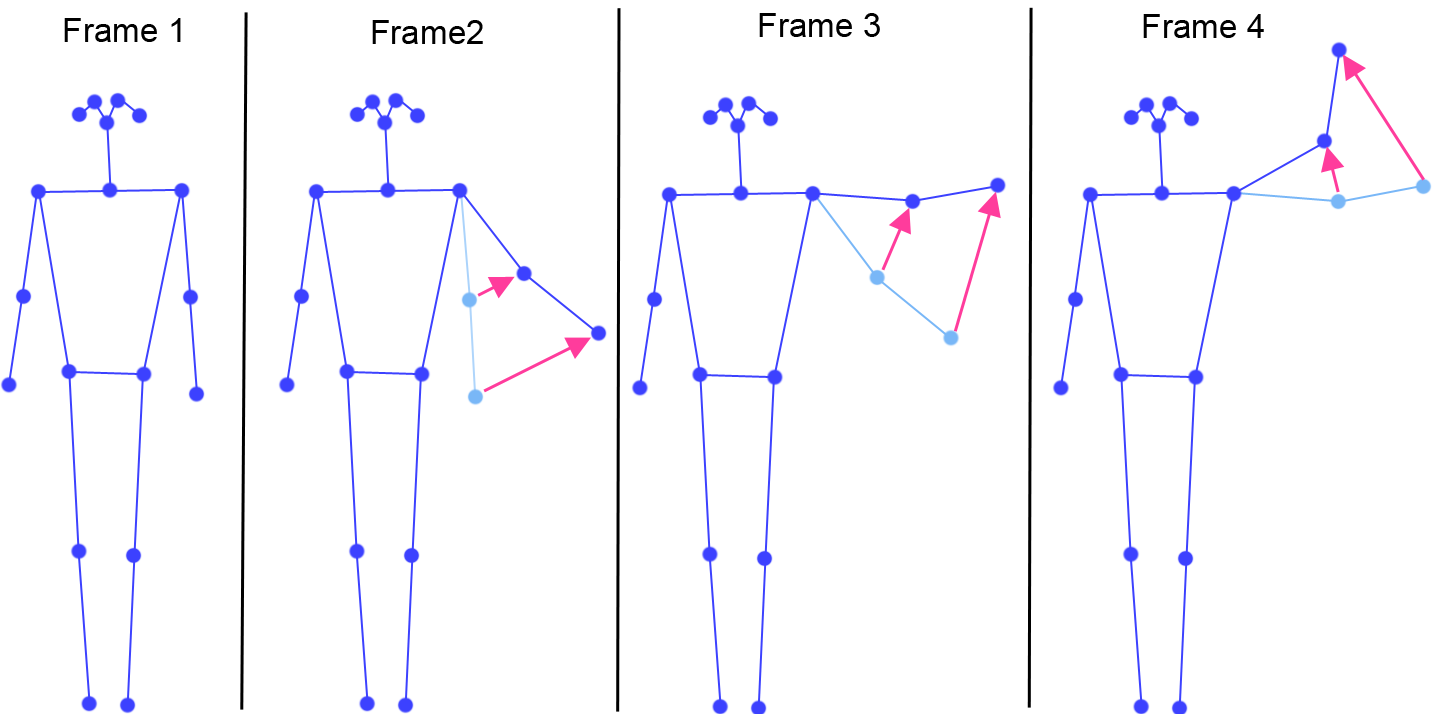
<style>
.page{position:relative;width:1432px;height:714px;background:#ffffff}
.page>*{position:absolute;margin:0}
.t1{font:33.3px "ArialMT";color:#000000}
</style>
<div class="page">
<p class="t1" style="left:759px;top:13px;width:121px;height:24px">Frame 3</p>
<p class="t1" style="left:1143px;top:14px;width:121px;height:24px">Frame 4</p>
<p class="t1" style="left:64px;top:18px;width:117px;height:24px">Frame 1</p>
<p class="t1" style="left:372px;top:20px;width:111px;height:24px">Frame2</p>
</div>
